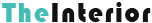
<style>
.page{position:relative;width:152px;height:23px;background:#ffffff}
.page>*{position:absolute;margin:0}
.t1{font:28px "Bauhaus93";letter-spacing:0.07em;color:#111212;scale:0.95 1}
.t2{font:28px "Bauhaus93";letter-spacing:0.07em;color:#44bbb3;scale:0.95 1}
</style>
<div class="page">
<p class="t1" style="left:2px;top:2px;width:149px;height:20px"><span class="t2">The</span>Interior</p>
</div>
